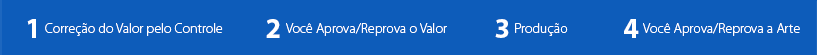
<style>
.page{position:relative;width:820px;height:55px;background:#0d5cba}
.page>*{position:absolute;margin:0}
.t1{font:28px "MyriadPro-Bold";color:#ffffff}
.t2{font:14px "MyriadPro-Light";color:#ffffff}
</style>
<div class="page">
<p class="t1" style="left:27px;top:19px;width:9px;height:19px">1</p>
<p class="t2" style="left:45px;top:23px;width:178px;height:13px">Correção do Valor pelo Controle</p>
<p class="t1" style="left:266px;top:19px;width:14px;height:19px">2</p>
<p class="t2" style="left:286px;top:23px;width:161px;height:13px">Você Aprova/Reprova o Valor</p>
<p class="t1" style="left:495px;top:19px;width:14px;height:19px">3</p>
<p class="t2" style="left:515px;top:23px;width:53px;height:13px">Produção</p>
<p class="t1" style="left:624px;top:19px;width:15px;height:19px">4</p>
<p class="t2" style="left:643px;top:23px;width:157px;height:13px">Você Aprova/Reprova a Arte</p>
</div>
